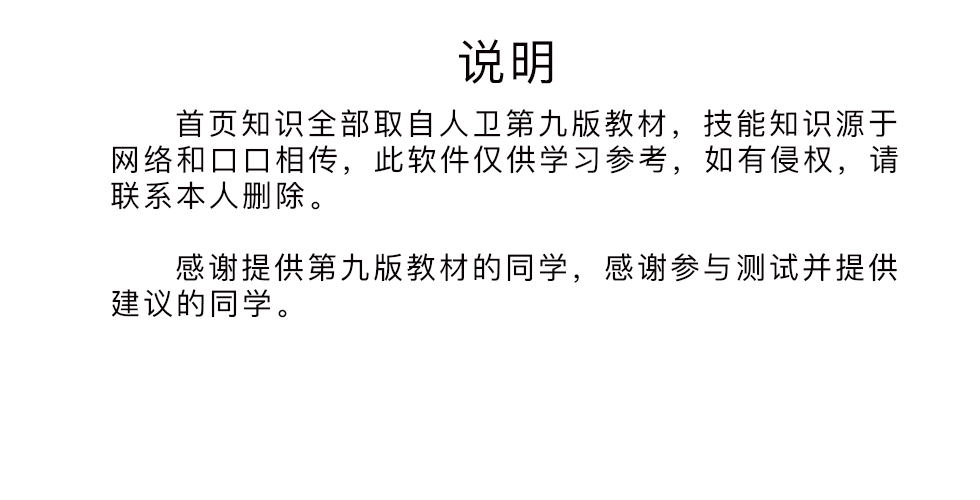
<style>
.page{position:relative;width:980px;height:500px;background:#ffffff}
.page>*{position:absolute;margin:0}
.t1{font:48px "PingFangSC-Regular";letter-spacing:0.1em;color:#080202}
.t2{font:30px "PingFangSC-Regular";letter-spacing:0.1em;color:#080202}
</style>
<div class="page">
<p class="t1" style="left:459px;top:39px;width:94px;height:45px">说明</p>
<p class="t2" style="left:111px;top:109px;width:787px;height:209px">首页知识全部取自人卫第九版教材，技能知识源于网络和口口相传，此软件仅供学习参考，如有侵权，请联系本人删除。<br><br>     感谢提供第九版教材的同学，感谢参与测试并提供建议的同学。</p>
</div>
